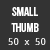
<style>
.page{position:relative;width:50px;height:50px;background:#333333}
.page>*{position:absolute;margin:0}
.t1{font:13px "BebasNeue";color:#ffffff}
.t2{font:9px "DroidSansMono";color:#ffffff}
</style>
<div class="page">
<p class="t1" style="left:11px;top:7px;width:28px;height:25px;text-align:center">SMall<br>Thumb</p>
<p class="t2" style="left:8px;top:38px;width:38px;height:7px">50 x 50</p>
</div>
